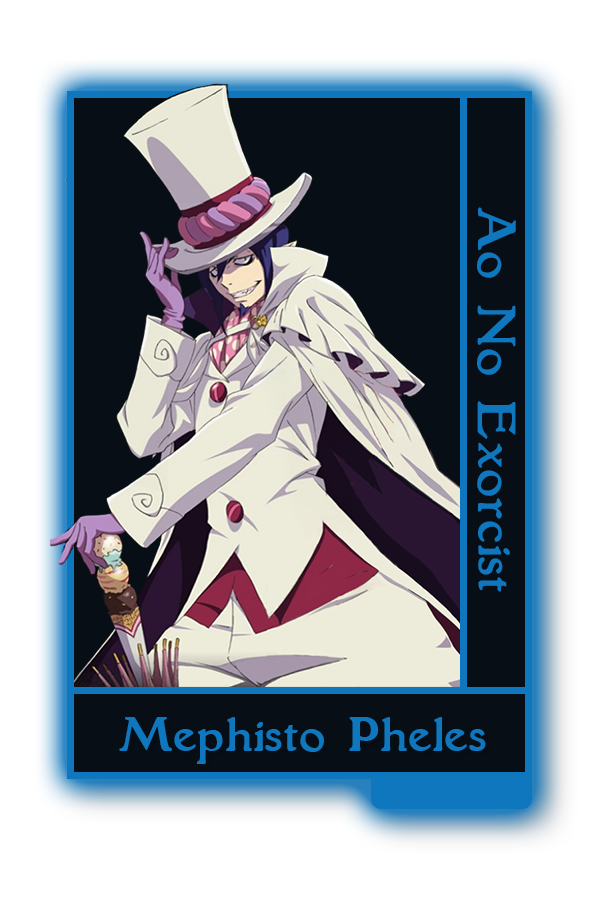
<style>
.page{position:relative;width:600px;height:900px;background:#070e16}
.page>*{position:absolute;margin:0}
.t1{font:48.8px "Grantham-Roman";color:#0f77be}
.t2{font:45.6px "Grantham-Roman";color:#0f77be}
</style>
<div class="page">
<p class="t1" style="left:477px;top:207px;width:39px;height:385px;rotate:90deg">Ao No Exorcist</p>
<p class="t2" style="left:119px;top:717px;width:367px;height:47px">Mephisto Pheles</p>
</div>
